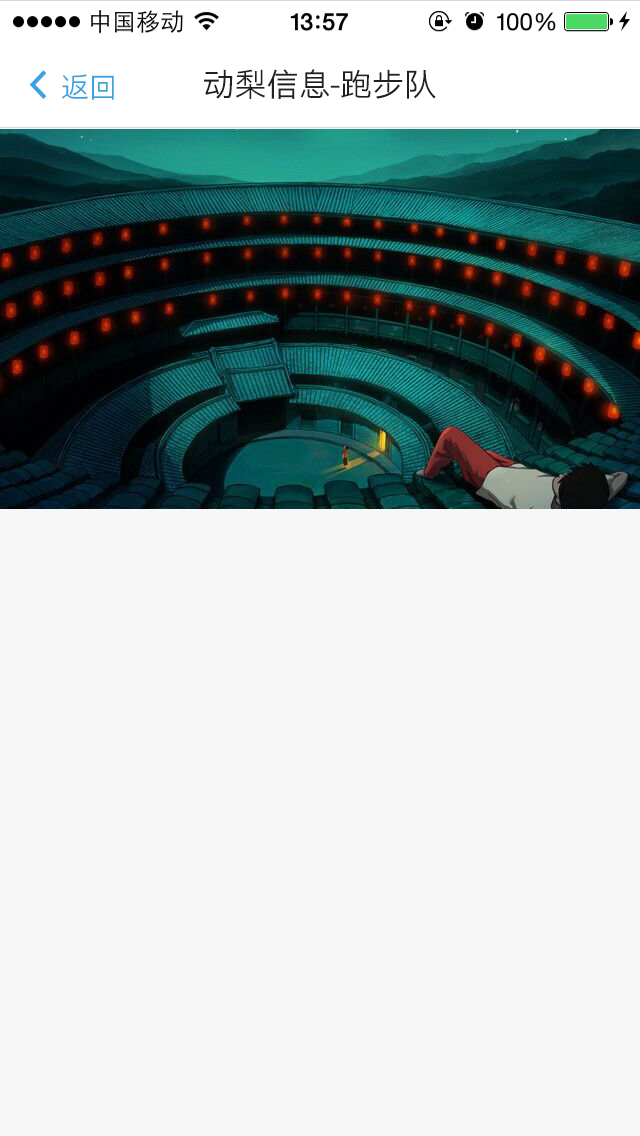
<style>
.page{position:relative;width:640px;height:1136px;background:#f7f7f7}
.page>*{position:absolute;margin:0}
.t1{font:28px "STHeitiSC-Light";color:#3ba2e0}
.t2{font:32px "STHeitiSC-Light";color:#202020}
</style>
<div class="page">
<p class="t1" style="left:61px;top:74px;width:53px;height:26px">返回</p>
<p class="t2" style="left:204px;top:69px;width:232px;height:30px">动梨信息-跑步队</p>
</div>
